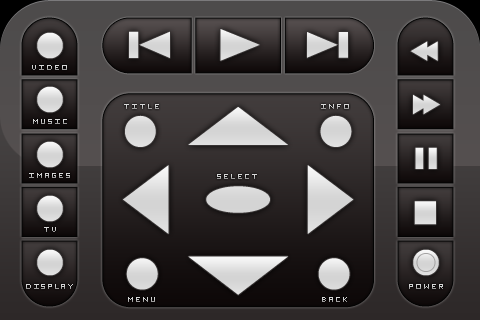
<style>
.page{position:relative;width:480px;height:320px}
.page>*{position:absolute;margin:0}
.t1{font:9px "Eichante"}
.t2{font:9px "Eichante";letter-spacing:-0.05em}
</style>
<div class="page">
<p class="t1" style="left:32px;top:65px;width:35px;height:5px">VIDEO</p>
<p class="t1" style="left:124px;top:104px;width:35px;height:5px">TITLE</p>
<p class="t1" style="left:321px;top:104px;width:28px;height:5px">INFO</p>
<p class="t1" style="left:33px;top:119px;width:34px;height:5px">MUSIC</p>
<p class="t1" style="left:29px;top:173px;width:41px;height:5px">IMAGES</p>
<p class="t1" style="left:217px;top:174px;width:40px;height:5px">SELECT</p>
<p class="t1" style="left:44px;top:227px;width:12px;height:5px">TV</p>
<p class="t2" style="left:26px;top:284px;width:47px;height:5px">DISPLAY</p>
<p class="t1" style="left:409px;top:284px;width:34px;height:5px">POWER</p>
<p class="t1" style="left:128px;top:297px;width:27px;height:5px">MENU</p>
<p class="t1" style="left:322px;top:297px;width:25px;height:5px">BACK</p>
</div>
